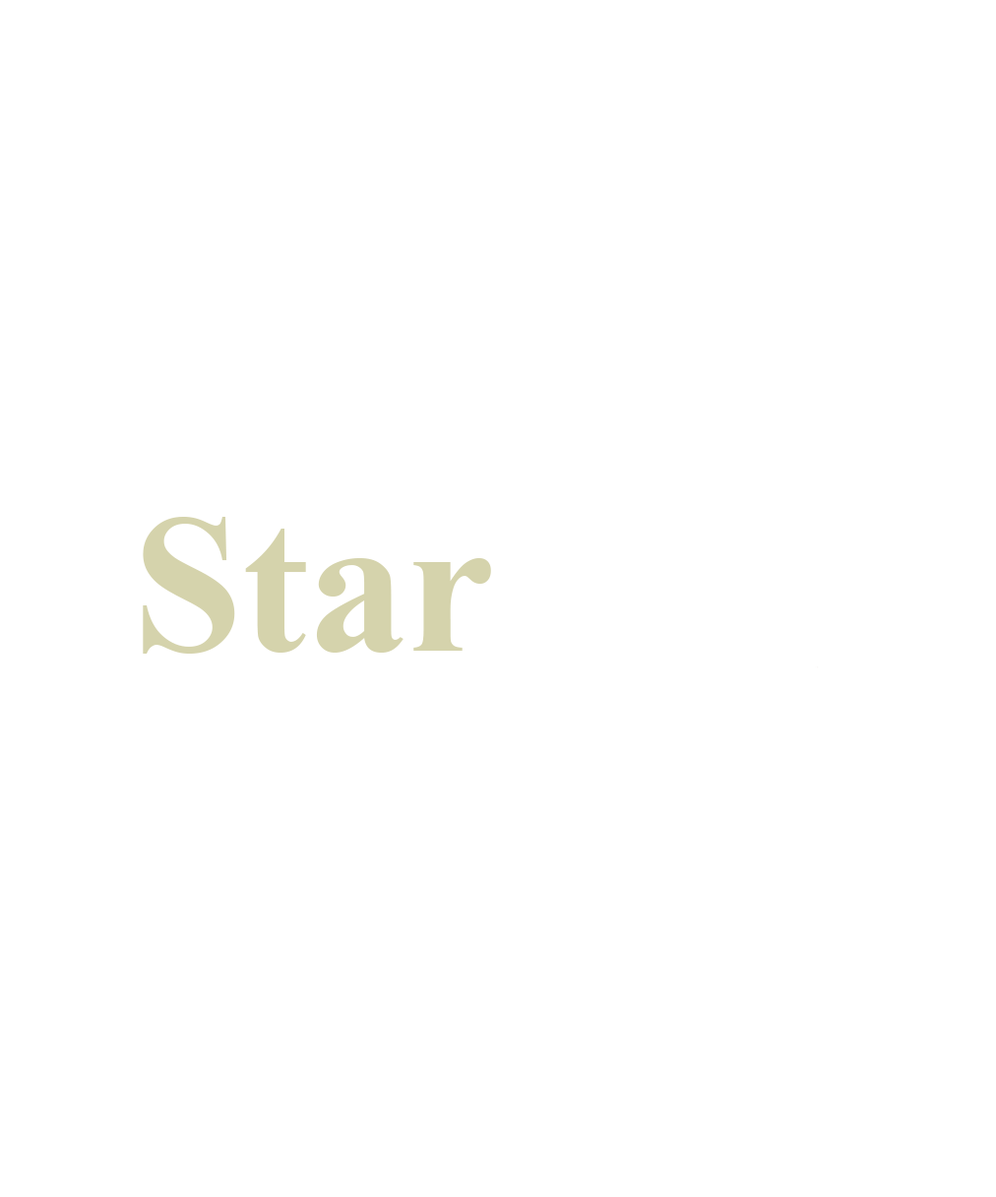
<style>
.page{position:relative;width:996px;height:1197px;background:#ffffff}
.page>*{position:absolute;margin:0}
.t1{font:196.9px "TimesNewRomanPS-BoldMT";color:#d5d3ac}
</style>
<div class="page">
<p class="t1" style="left:143px;top:517px;width:348px;height:137px">Star</p>
</div>
